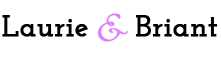
<style>
.page{position:relative;width:221px;height:57px;background:#ffffff}
.page>*{position:absolute;margin:0}
.t1{font:30px "JosefinSlab-SemiBold";color:#000000;font-weight:bold}
.t2{font:30px "Miama-Regular";color:#e27cff;font-weight:bold}
</style>
<div class="page">
<p class="t1" style="left:2px;top:15px;width:216px;height:22px">Laurie    Briant</p>
<p class="t2" style="left:97px;top:13px;width:31px;height:29px">&amp;</p>
</div>
